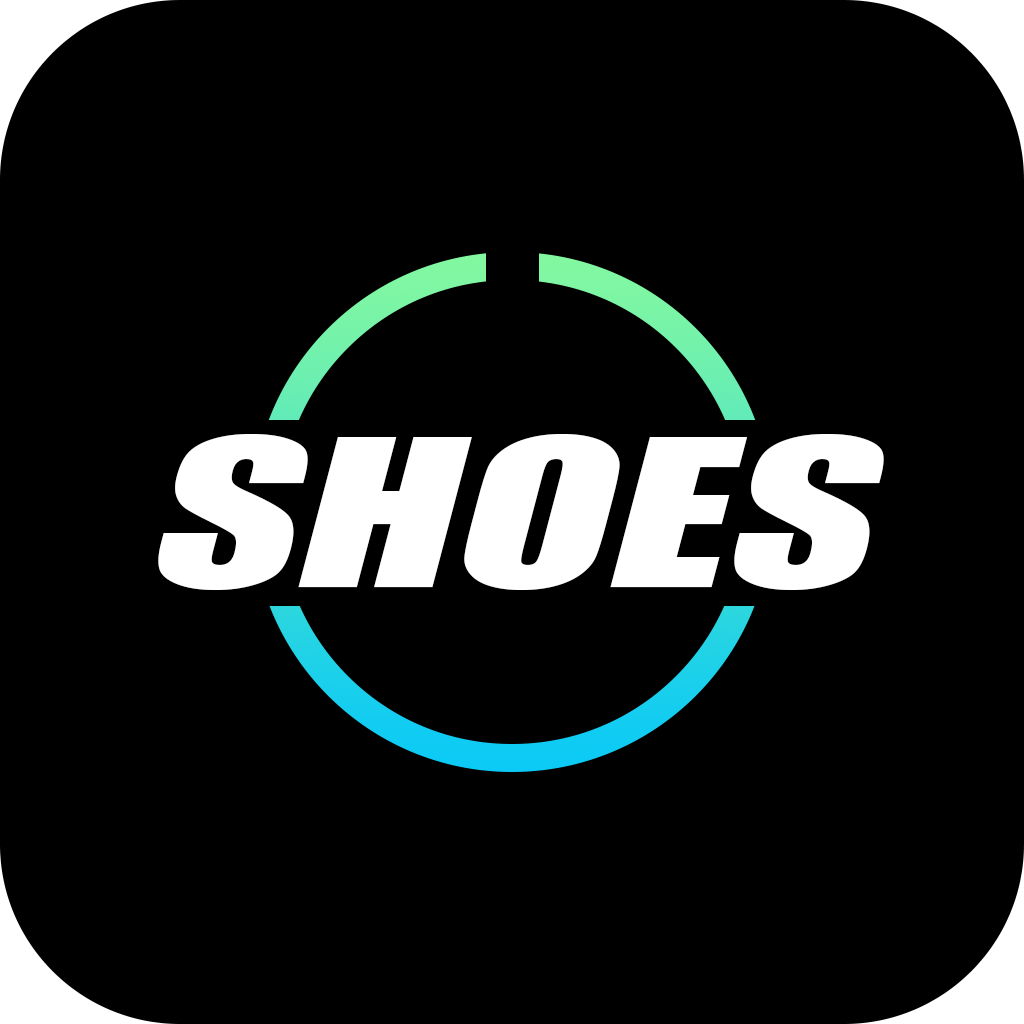
<style>
.page{position:relative;width:1024px;height:1024px;background:#000000}
.page>*{position:absolute;margin:0}
.t1{font:190.3px "Impact";color:#ffffff;font-style:italic;scale:1.49 1}
</style>
<div class="page">
<p class="t1" style="left:158px;top:434px;width:726px;height:156px">SHOES</p>
</div>
